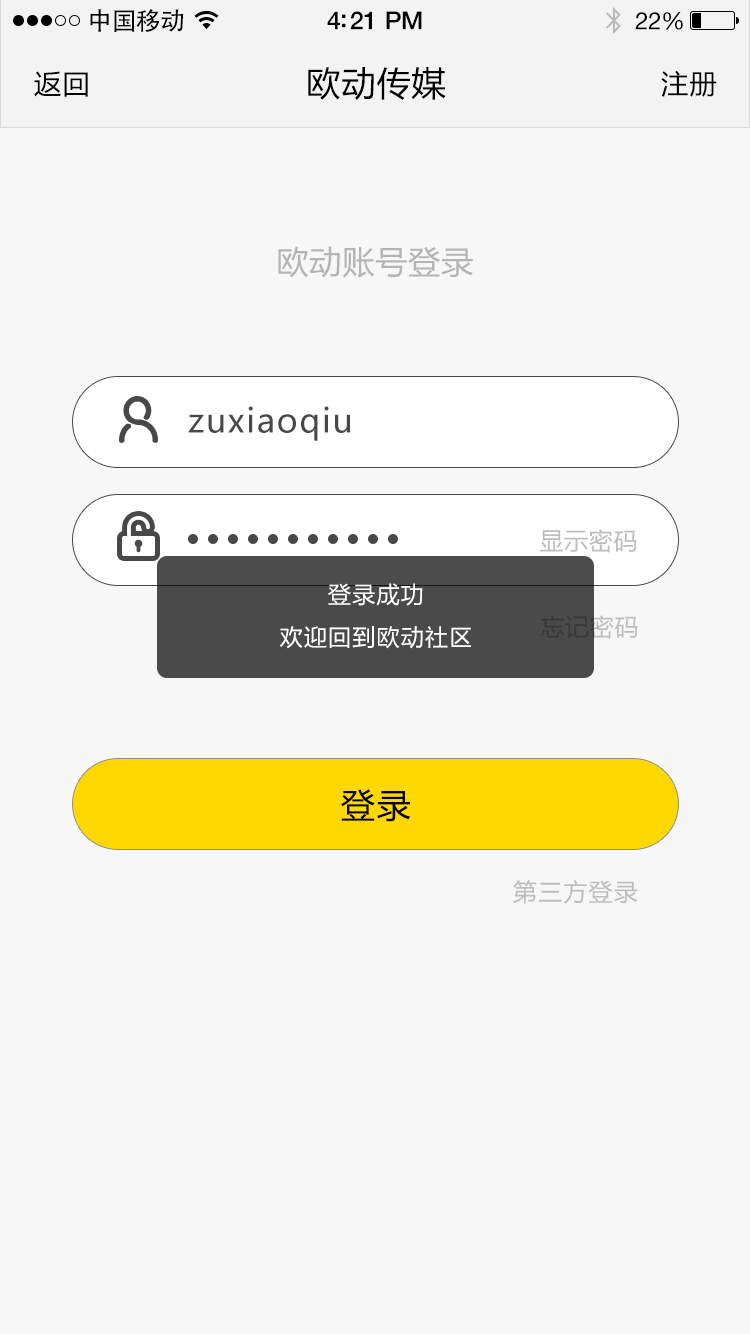
<style>
.page{position:relative;width:750px;height:1334px;background:#f7f7f7}
.page>*{position:absolute;margin:0}
.t1{font:25px "AdobeHeitiStd-Regular";letter-spacing:-0.025em;color:#000000}
.t2{font:25px "HelveticaNeue-Medium";letter-spacing:-0.02em;color:#000000}
.t3{font:24px "HelveticaNeue";letter-spacing:-0.02em;color:#000000}
.t4{font:27px "MicrosoftYaHei";letter-spacing:0.05em;color:#000000}
.t5{font:34px "MicrosoftYaHei";letter-spacing:0.03em;color:#000000}
.t6{font:32px "MicrosoftYaHei";letter-spacing:0.03em;color:#b4b4b4}
.t7{font:33px "MicrosoftYaHei";letter-spacing:0.05em;color:#555555}
.t8{font:24px "MicrosoftYaHei";letter-spacing:0.03em;color:#bdbdbd}
.t9{font:23px "MicrosoftYaHei";letter-spacing:0.05em;color:#ffffff}
.t10{font:34px "MicrosoftYaHei";letter-spacing:0.05em;color:#000000}
.t11{font:24px "MicrosoftYaHei";letter-spacing:0.05em;color:#bdbdbd}
</style>
<div class="page">
<p class="t1" style="left:90px;top:9px;width:94px;height:23px">中国移动</p>
<p class="t2" style="left:327px;top:11px;width:95px;height:19px">4:21 PM</p>
<p class="t3" style="left:635px;top:12px;width:48px;height:18px">22%</p>
<p class="t4" style="left:34px;top:71px;width:54px;height:26px">返回</p>
<p class="t5" style="left:308px;top:67px;width:138px;height:33px">欧动传媒</p>
<p class="t4" style="left:661px;top:70px;width:56px;height:27px">注册</p>
<p class="t6" style="left:278px;top:246px;width:195px;height:32px">欧动账号登录</p>
<p class="t7" style="left:188px;top:406px;width:162px;height:35px">zuxiaoqiu</p>
<p class="t8" style="left:540px;top:529px;width:97px;height:24px">显示密码</p>
<p class="t9" style="left:328px;top:583px;width:95px;height:23px">登录成功</p>
<p class="t9" style="left:280px;top:626px;width:191px;height:23px">欢迎回到欧动社区</p>
<p class="t10" style="left:341px;top:789px;width:70px;height:33px">登录</p>
<p class="t11" style="left:513px;top:880px;width:125px;height:24px">第三方登录</p>
</div>
